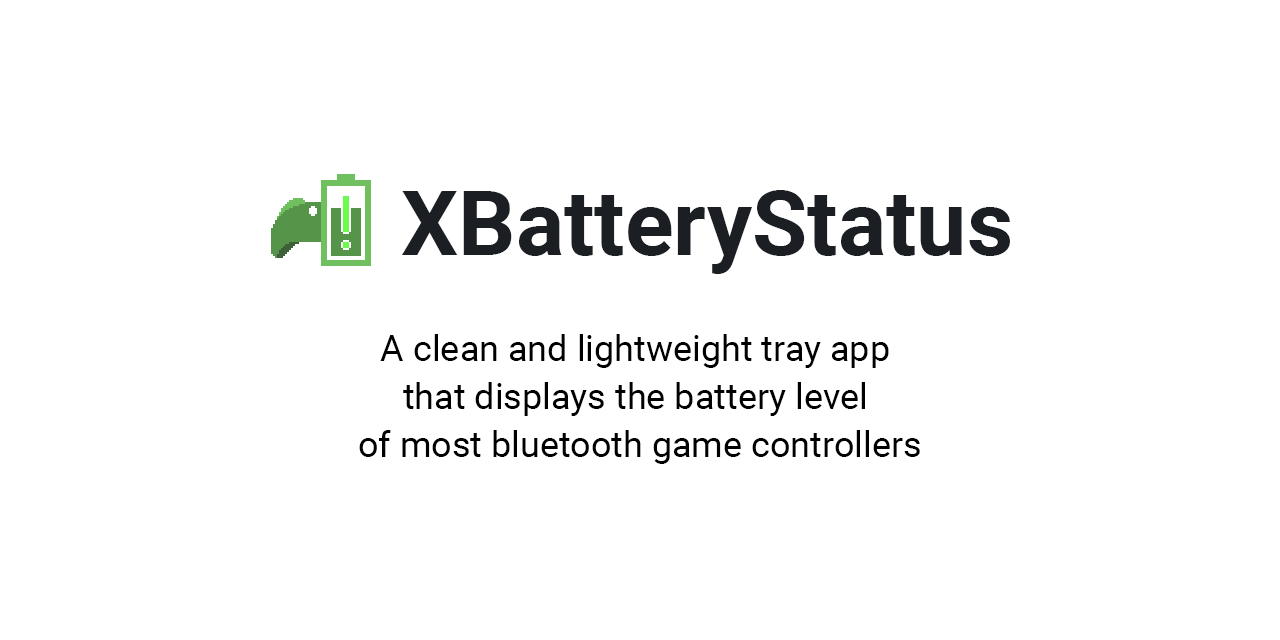
<style>
.page{position:relative;width:1280px;height:640px;background:#ffffff}
.page>*{position:absolute;margin:0}
.t1{font:90px "Roboto-Bold";color:#1b1f23}
.t2{font:36px/48px "Roboto-Regular";color:#000000}
</style>
<div class="page">
<p class="t1" style="left:402px;top:190px;width:608px;height:84px">XBatteryStatus</p>
<p class="t2" style="left:359px;top:334px;width:561px;height:130px;text-align:center">A clean and lightweight tray app <br>that displays the battery level <br>of most bluetooth game controllers</p>
</div>
